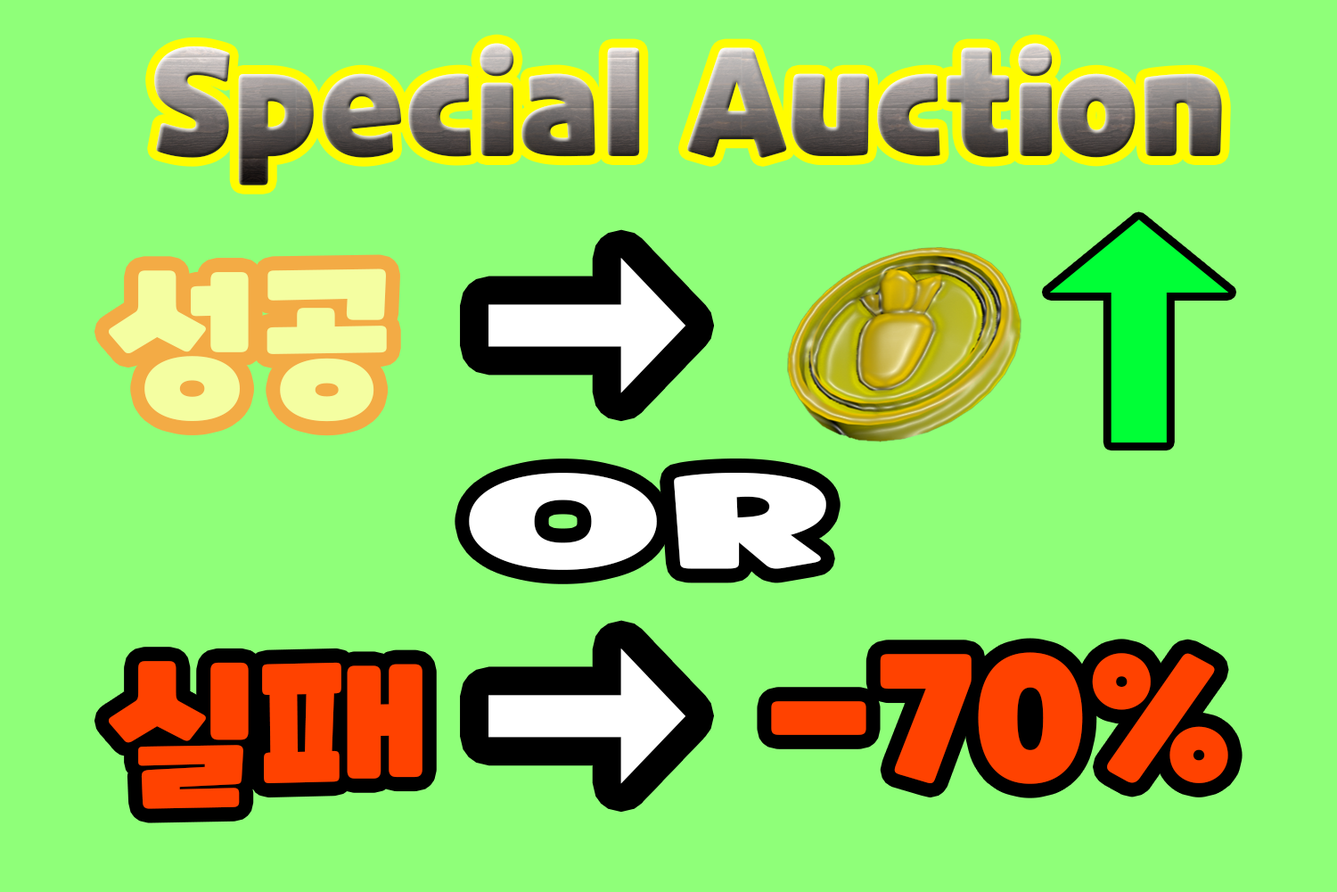
<style>
.page{position:relative;width:1337px;height:892px;background:#8fff79}
.page>*{position:absolute;margin:0}
.t1{font:147.2px "CookieRunOTF-Black"}
.t2{font:445.2px "CookieRunOTF-Black";color:#00ff36;scale:0.53 1}
.t3{font:336px "CookieRunOTF-Black";color:#ffffff;scale:0.62 1}
.t4{font:155px "CookieRunOTF-Black";color:#f4fea1;scale:1.1 1}
.t5{font:128.2px "CookieRunOTF-Black";color:#ffffff;scale:2.16 1}
.t6{font:336.2px "CookieRunOTF-Black";color:#ffffff;scale:0.62 1}
.t7{font:174.1px "CookieRunOTF-Black";color:#ff4200;scale:1.06 1}
.t8{font:155.1px "CookieRunOTF-Black";color:#ff4200;scale:1.1 1}
</style>
<div class="page">
<p class="t1" style="left:154px;top:43px;width:1068px;height:142px">Special Auction</p>
<p class="t2" style="left:1049px;top:219px;width:181px;height:224px;rotate:-90deg">→</p>
<p class="t3" style="left:489px;top:258px;width:198px;height:135px">→</p>
<p class="t4" style="left:109px;top:268px;width:278px;height:154px">성공</p>
<p class="t5" style="left:469px;top:473px;width:358px;height:97px">OR</p>
<p class="t6" style="left:489px;top:648px;width:198px;height:136px">→</p>
<p class="t7" style="left:771px;top:652px;width:458px;height:132px">-70%</p>
<p class="t8" style="left:109px;top:661px;width:314px;height:148px">실패</p>
</div>
